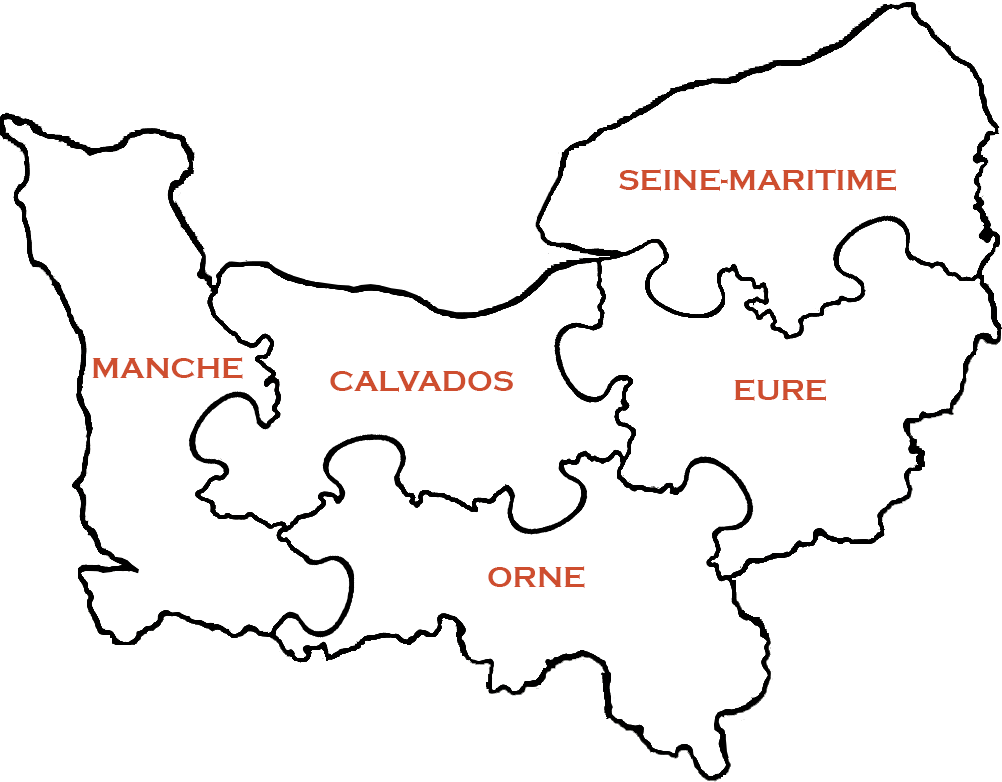
<style>
.page{position:relative;width:1002px;height:782px;background:#ffffff}
.page>*{position:absolute;margin:0}
.t1{font:30px "CopperplateGothic-Bold";color:#ce4e2f}
</style>
<div class="page">
<p class="t1" style="left:619px;top:169px;width:277px;height:22px">SEINE-MARITIME</p>
<p class="t1" style="left:92px;top:357px;width:151px;height:22px">MANCHE</p>
<p class="t1" style="left:330px;top:371px;width:183px;height:21px">CALVADOS</p>
<p class="t1" style="left:734px;top:379px;width:92px;height:22px">EURE</p>
<p class="t1" style="left:488px;top:566px;width:97px;height:22px">ORNE</p>
</div>
